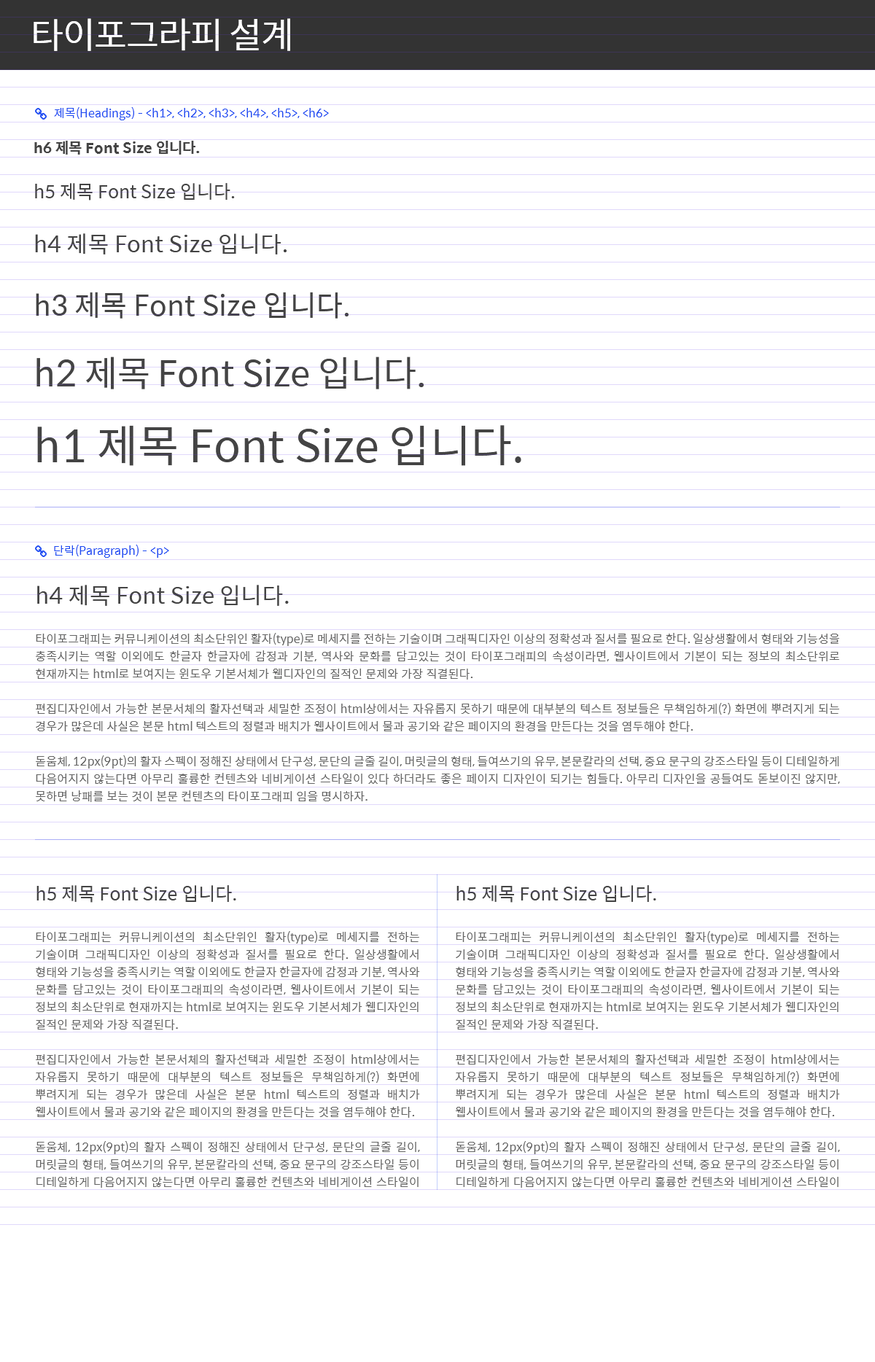
<style>
.page{position:relative;width:875px;height:1362px;background:#ffffff}
.page>*{position:absolute;margin:0}
.t1{font:35.6px "SpoqaHanSans-Regular";letter-spacing:-0.025em;color:#ffffff}
.t2{font:11.7px "SpoqaHanSans-Regular";color:#1f4cf2}
.t3{font:14.6px "SpoqaHanSans-Bold";color:#444444}
.t4{font:18.2px "SpoqaHanSans-Regular";color:#444444}
.t5{font:22.8px "SpoqaHanSans-Regular";color:#444444}
.t6{font:28.5px "SpoqaHanSans-Regular";color:#444444}
.t7{font:35.6px "SpoqaHanSans-Regular";color:#444444}
.t8{font:44.5px "SpoqaHanSans-Regular";color:#444444}
.t9{font:11.7px "SpoqaHanSans-Regular";color:#656565}
</style>
<div class="page">
<p class="t1" style="left:34px;top:18px;width:256px;height:33px">타이포그라피 설계</p>
<p class="t2" style="left:54px;top:107px;width:275px;height:13px">제목(Headings) - &lt;h1&gt;, &lt;h2&gt;, &lt;h3&gt;, &lt;h4&gt;, &lt;h5&gt;, &lt;h6&gt;</p>
<p class="t3" style="left:34px;top:141px;width:487px;height:325px">h6 제목 Font Size 입니다.<br><span class="t4">h5 제목 Font Size 입니다.<br></span><span class="t5">h4 제목 Font Size 입니다.<br></span><span class="t6">h3 제목 Font Size 입니다.<br></span><span class="t7">h2 제목 Font Size 입니다.<br></span><span class="t8">h1 제목 Font Size 입니다.</span></p>
<p class="t2" style="left:54px;top:545px;width:115px;height:13px">단락(Paragraph) - &lt;p&gt;</p>
<p class="t9" style="left:36px;top:585px;width:804px;height:217px"><span class="t5">h4 제목 Font Size 입니다.<br></span>타이포그래피는 커뮤니케이션의 최소단위인 활자(type)로 메세지를 전하는 기술이며 그래픽디자인 이상의 정확성과 질서를 필요로 한다. 일상생활에서 형태와 기능성을 충족시키는 역할 이외에도 한글자 한글자에 감정과 기분, 역사와 문화를 담고있는 것이 타이포그래피의 속성이라면, 웹사이트에서 기본이 되는 정보의 최소단위로 현재까지는 html로 보여지는 윈도우 기본서체가 웹디자인의 질적인 문제와 가장 직결된다.<br>편집디자인에서 가능한 본문서체의 활자선택과 세밀한 조정이 html상에서는 자유롭지 못하기 때문에 대부분의 텍스트 정보들은 무책임하게(?) 화면에 뿌려지게 되는 경우가 많은데 사실은 본문 html 텍스트의 정렬과 배치가 웹사이트에서 물과 공기와 같은 페이지의 환경을 만든다는 것을 염두해야 한다.<br>돋움체, 12px(9pt)의 활자 스펙이 정해진 상태에서 단구성, 문단의 글줄 길이, 머릿글의 형태, 들여쓰기의 유무, 본문칼라의 선택, 중요 문구의 강조스타일 등이 디테일하게 다음어지지 않는다면 아무리 훌륭한 컨텐츠와 네비게이션 스타일이 있다 하더라도 좋은 페이지 디자인이 되기는 힘들다. 아무리 디자인을 공들여도 돋보이진 않지만, 못하면 낭패를 보는 것이 본문 컨텐츠의 타이포그래피 임을 명시하자.</p>
<p class="t9" style="left:36px;top:885px;width:384px;height:303px;text-align:justify"><span class="t4">h5 제목 Font Size 입니다.<br></span>타이포그래피는 커뮤니케이션의 최소단위인 활자(type)로 메세지를 전하는 기술이며 그래픽디자인 이상의 정확성과 질서를 필요로 한다. 일상생활에서 형태와 기능성을 충족시키는 역할 이외에도 한글자 한글자에 감정과 기분, 역사와 문화를 담고있는 것이 타이포그래피의 속성이라면, 웹사이트에서 기본이 되는 정보의 최소단위로 현재까지는 html로 보여지는 윈도우 기본서체가 웹디자인의 질적인 문제와 가장 직결된다.<br>편집디자인에서 가능한 본문서체의 활자선택과 세밀한 조정이 html상에서는 자유롭지 못하기 때문에 대부분의 텍스트 정보들은 무책임하게(?) 화면에 뿌려지게 되는 경우가 많은데 사실은 본문 html 텍스트의 정렬과 배치가 웹사이트에서 물과 공기와 같은 페이지의 환경을 만든다는 것을 염두해야 한다. <br>돋움체, 12px(9pt)의 활자 스펙이 정해진 상태에서 단구성, 문단의 글줄 길이, 머릿글의 형태, 들여쓰기의 유무, 본문칼라의 선택, 중요 문구의 강조스타일 등이 디테일하게 다음어지지 않는다면 아무리 훌륭한 컨텐츠와 네비게이션 스타일이 있다 하더라도 좋은 페이지 디자인이 되기는 힘들다. 아무리 디자인을 공들여도 돋보이진 않지만, 못하면 낭패를 보는 것이 본문 컨텐츠의 타이포그래피 임을 명시하자.</p>
<p class="t9" style="left:456px;top:885px;width:384px;height:303px;text-align:justify"><span class="t4">h5 제목 Font Size 입니다.<br></span>타이포그래피는 커뮤니케이션의 최소단위인 활자(type)로 메세지를 전하는 기술이며 그래픽디자인 이상의 정확성과 질서를 필요로 한다. 일상생활에서 형태와 기능성을 충족시키는 역할 이외에도 한글자 한글자에 감정과 기분, 역사와 문화를 담고있는 것이 타이포그래피의 속성이라면, 웹사이트에서 기본이 되는 정보의 최소단위로 현재까지는 html로 보여지는 윈도우 기본서체가 웹디자인의 질적인 문제와 가장 직결된다.<br>편집디자인에서 가능한 본문서체의 활자선택과 세밀한 조정이 html상에서는 자유롭지 못하기 때문에 대부분의 텍스트 정보들은 무책임하게(?) 화면에 뿌려지게 되는 경우가 많은데 사실은 본문 html 텍스트의 정렬과 배치가 웹사이트에서 물과 공기와 같은 페이지의 환경을 만든다는 것을 염두해야 한다. <br>돋움체, 12px(9pt)의 활자 스펙이 정해진 상태에서 단구성, 문단의 글줄 길이, 머릿글의 형태, 들여쓰기의 유무, 본문칼라의 선택, 중요 문구의 강조스타일 등이 디테일하게 다음어지지 않는다면 아무리 훌륭한 컨텐츠와 네비게이션 스타일이 있다 하더라도 좋은 페이지 디자인이 되기는 힘들다. 아무리 디자인을 공들여도 돋보이진 않지만, 못하면 낭패를 보는 것이 본문 컨텐츠의 타이포그래피 임을 명시하자.</p>
</div>
